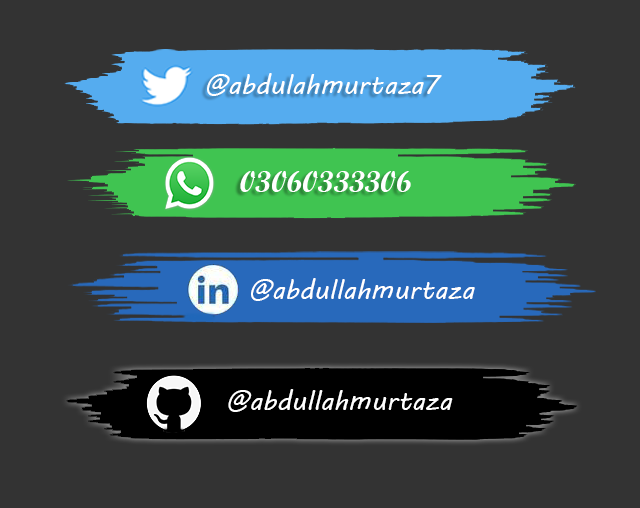
<style>
.page{position:relative;width:640px;height:508px;background:#333333}
.page>*{position:absolute;margin:0}
.t1{font:27px "MVBoli";color:#ffffff}
.t2{font:30px "ScriptMTBold";color:#ffffff}
</style>
<div class="page">
<p class="t1" style="left:207px;top:73px;width:235px;height:23px">@abdulahmurtaza7</p>
<p class="t2" style="left:240px;top:171px;width:171px;height:21px">03060333306</p>
<p class="t1" style="left:251px;top:278px;width:224px;height:23px">@abdullahmurtaza</p>
<p class="t1" style="left:228px;top:389px;width:225px;height:23px">@abdullahmurtaza</p>
</div>
